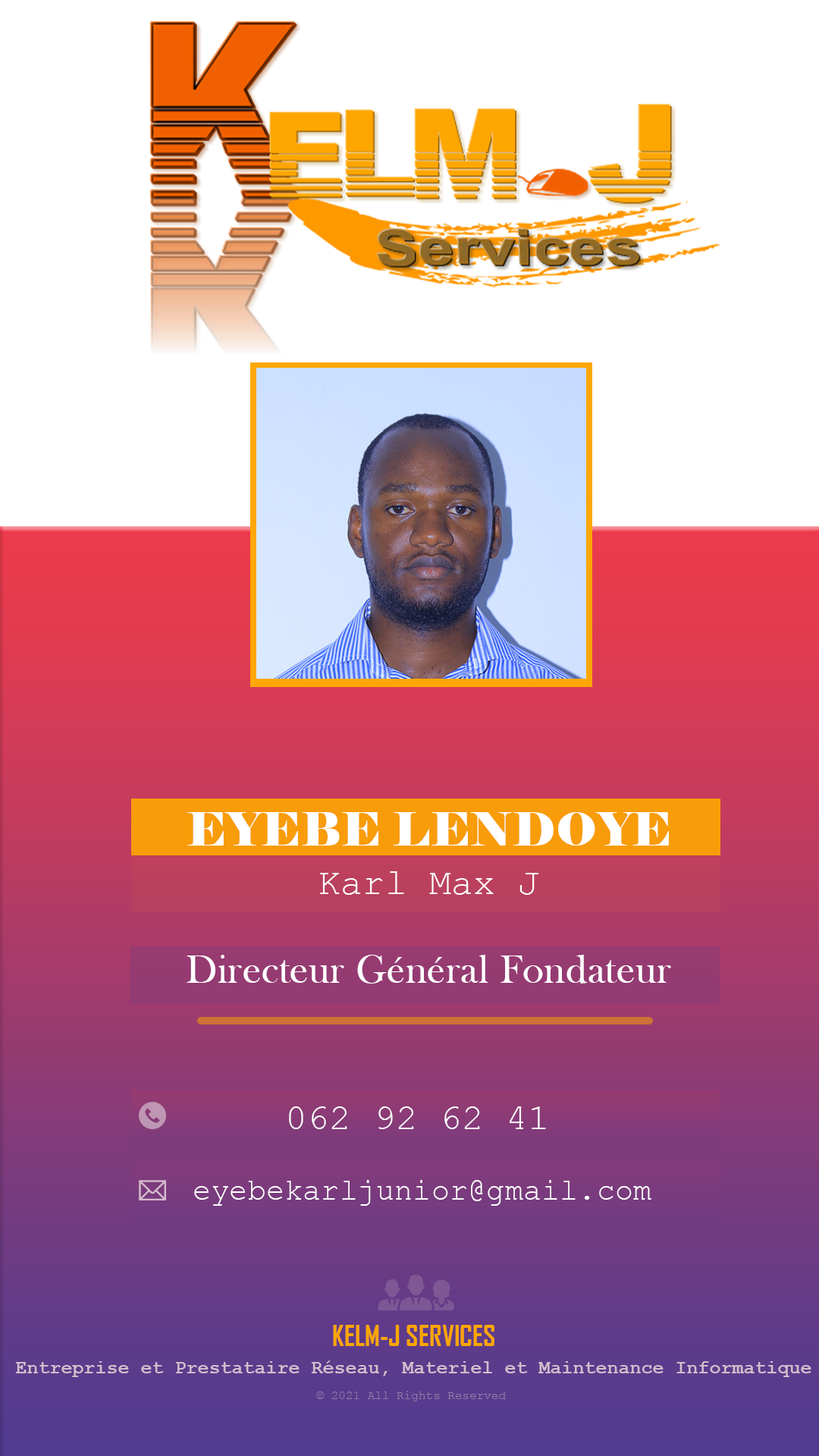
<style>
.page{position:relative;width:819px;height:1456px;background:#ffffff}
.page>*{position:absolute;margin:0}
.t1{font:45.5px "Elephant-Regular";letter-spacing:0.01em;color:#ffffff}
.t2{font:36.4px "CourierNewPSMT";letter-spacing:0.005em;color:#ffffff}
.t3{font:40.9px "BaskOldFace";letter-spacing:0.01em;color:#ffffff}
.t4{font:30.3px "CourierNewPSMT";letter-spacing:0.005em;color:#ffffff}
.t5{font:27.3px "AgencyFB-Bold";color:#fea600}
.t6{font:19px "CourierNewPS-BoldMT";color:#ebbfdf}
.t7{font:12.1px "CourierNewPSMT";color:#957aa7}
</style>
<div class="page">
<p class="t1" style="left:187px;top:812px;width:482px;height:34px">EYEBE LENDOYE</p>
<p class="t2" style="left:320px;top:871px;width:219px;height:24px">Karl Max J</p>
<p class="t3" style="left:187px;top:955px;width:484px;height:29px">Directeur Général Fondateur</p>
<p class="t2" style="left:289px;top:1106px;width:257px;height:23px">062 92 62 41</p>
<p class="t4" style="left:194px;top:1180px;width:457px;height:26px">eyebekarljunior@gmail.com</p>
<p class="t5" style="left:333px;top:1325px;width:161px;height:21px">KELM-J SERVICES</p>
<p class="t6" style="left:15px;top:1360px;width:796px;height:17px">Entreprise et Prestataire Réseau, Materiel et Maintenance Informatique</p>
<p class="t7" style="left:316px;top:1391px;width:190px;height:10px">© 2021 All Rights Reserved</p>
</div>
